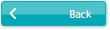
<style>
.page{position:relative;width:110px;height:30px;background:#4dc2cb}
.page>*{position:absolute;margin:0}
.t1{font:11px "MyriadPro-Regular";color:#ffffff}
</style>
<div class="page">
<p class="t1" style="left:70px;top:10px;width:22px;height:8px">Back</p>
</div>
